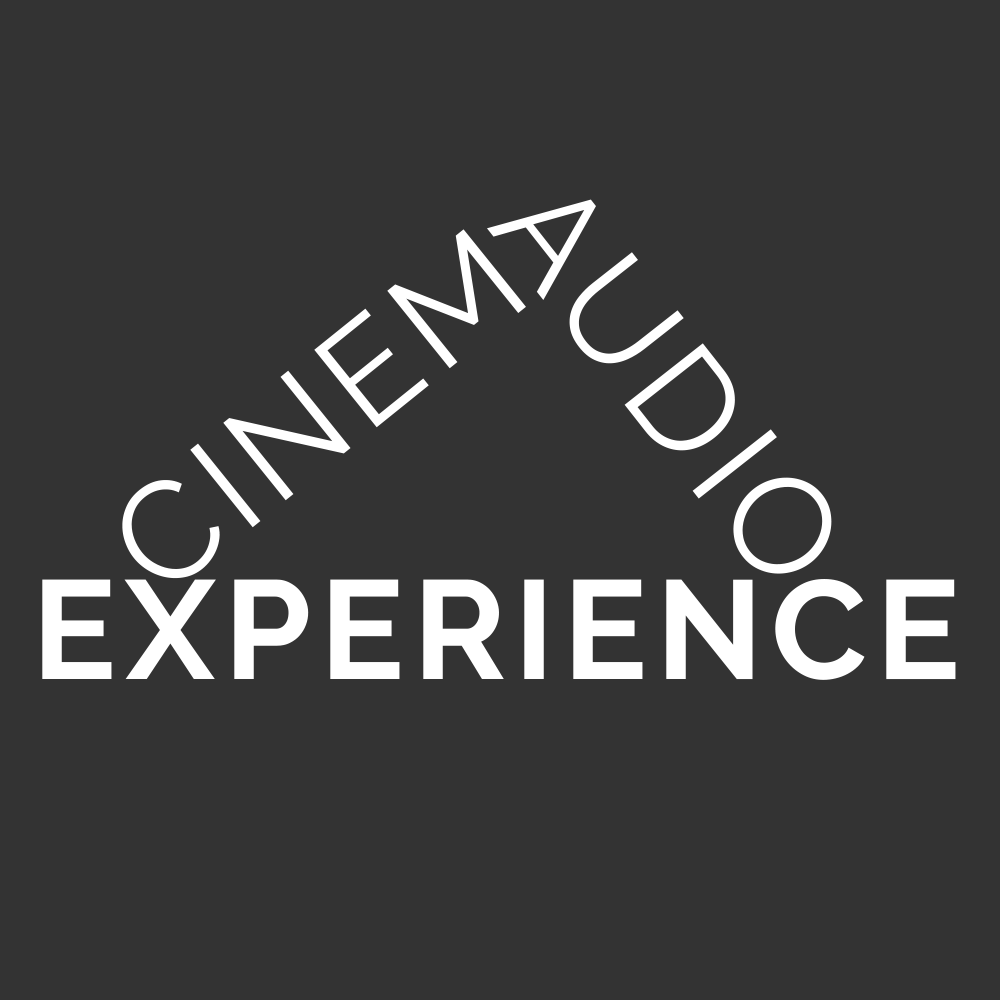
<style>
.page{position:relative;width:1000px;height:1000px;background:#333333}
.page>*{position:absolute;margin:0}
.t1{font:140px "Raleway-Regular";letter-spacing:0.062em;color:#ffffff}
.t2{font:140px "Raleway-Bold";letter-spacing:0.062em;color:#ffffff}
</style>
<div class="page">
<p class="t1" style="left:487px;top:199px;width:345px;height:375px;rotate:52deg">AUDIO</p>
<p class="t1" style="left:122px;top:229px;width:404px;height:350px;rotate:-39deg">CINEM</p>
<p class="t2" style="left:42px;top:579px;width:914px;height:101px">EXPERIENCE</p>
</div>
